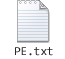
<style>
.page{position:relative;width:65px;height:59px;background:#ffffff}
.page>*{position:absolute;margin:0}
.t1{font:12px "Consolas";color:#282828}
</style>
<div class="page">
<p class="t1" style="left:15px;top:47px;width:38px;height:9px">PE.txt</p>
</div>
